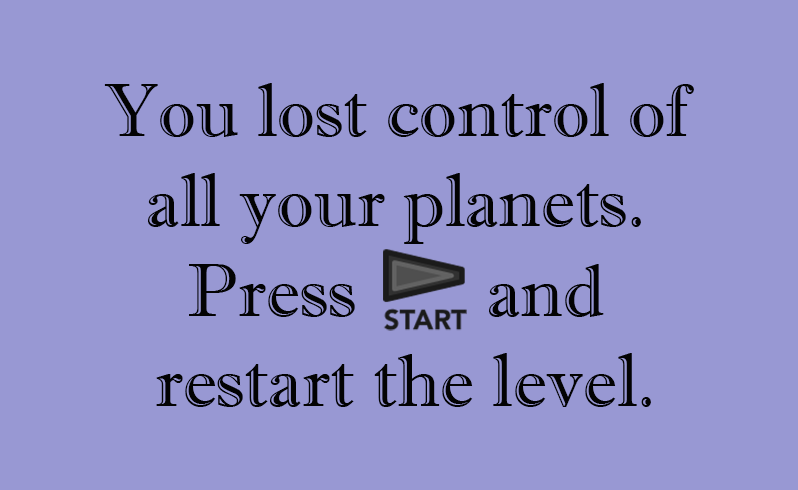
<style>
.page{position:relative;width:798px;height:490px;background:#9898d3}
.page>*{position:absolute;margin:0}
.t1{font:74.8px "ImprintMT-Shadow";color:#030303}
</style>
<div class="page">
<p class="t1" style="left:104px;top:83px;width:590px;height:324px;text-align:center">You lost control of <br>all your planets. <br>Press       and <br>restart the level.</p>
</div>
